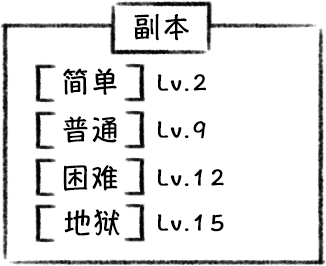
<style>
.page{position:relative;width:326px;height:266px;background:#ffffff}
.page>*{position:absolute;margin:0}
.t1{font:28px "HannotateSC-W7";letter-spacing:0.055em;color:#000000}
.t2{font:24px "HannotateSC-W7";letter-spacing:0.055em;color:#000000}
</style>
<div class="page">
<p class="t1" style="left:134px;top:13px;width:55px;height:28px">副本</p>
<p class="t1" style="left:63px;top:68px;width:54px;height:27px">简单</p>
<p class="t2" style="left:158px;top:74px;width:48px;height:18px">Lv.2</p>
<p class="t1" style="left:63px;top:116px;width:54px;height:27px">普通</p>
<p class="t2" style="left:158px;top:121px;width:48px;height:18px">Lv.9</p>
<p class="t1" style="left:63px;top:165px;width:55px;height:26px">困难</p>
<p class="t2" style="left:158px;top:169px;width:66px;height:18px">Lv.12</p>
<p class="t1" style="left:64px;top:209px;width:56px;height:27px">地狱</p>
<p class="t2" style="left:158px;top:214px;width:66px;height:18px">Lv.15</p>
</div>
